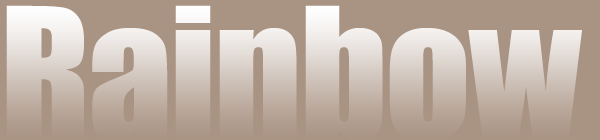
<style>
.page{position:relative;width:600px;height:140px;background:#a99383}
.page>*{position:absolute;margin:0}
.t1{font:168px "Impact"}
</style>
<div class="page">
<p class="t1" style="left:6px;top:5px;width:576px;height:136px">Rainbow</p>
</div>
